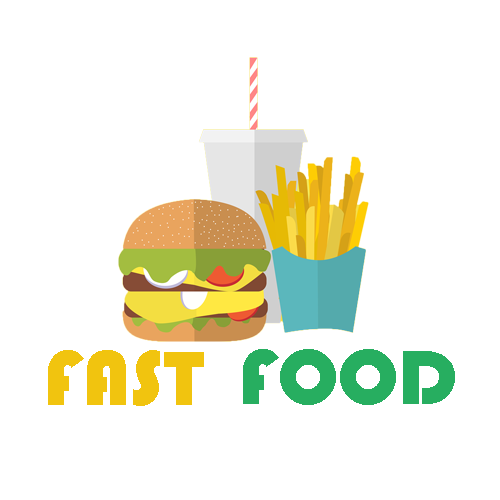
<style>
.page{position:relative;width:500px;height:500px;background:#ffffff}
.page>*{position:absolute;margin:0}
.t1{font:80px "Bauhaus93";color:#f1c40f}
.t2{font:80px "Bauhaus93";color:#27ae60}
</style>
<div class="page">
<p class="t1" style="left:48px;top:350px;width:156px;height:56px">FAST</p>
<p class="t2" style="left:243px;top:349px;width:212px;height:56px">FOOD</p>
</div>
